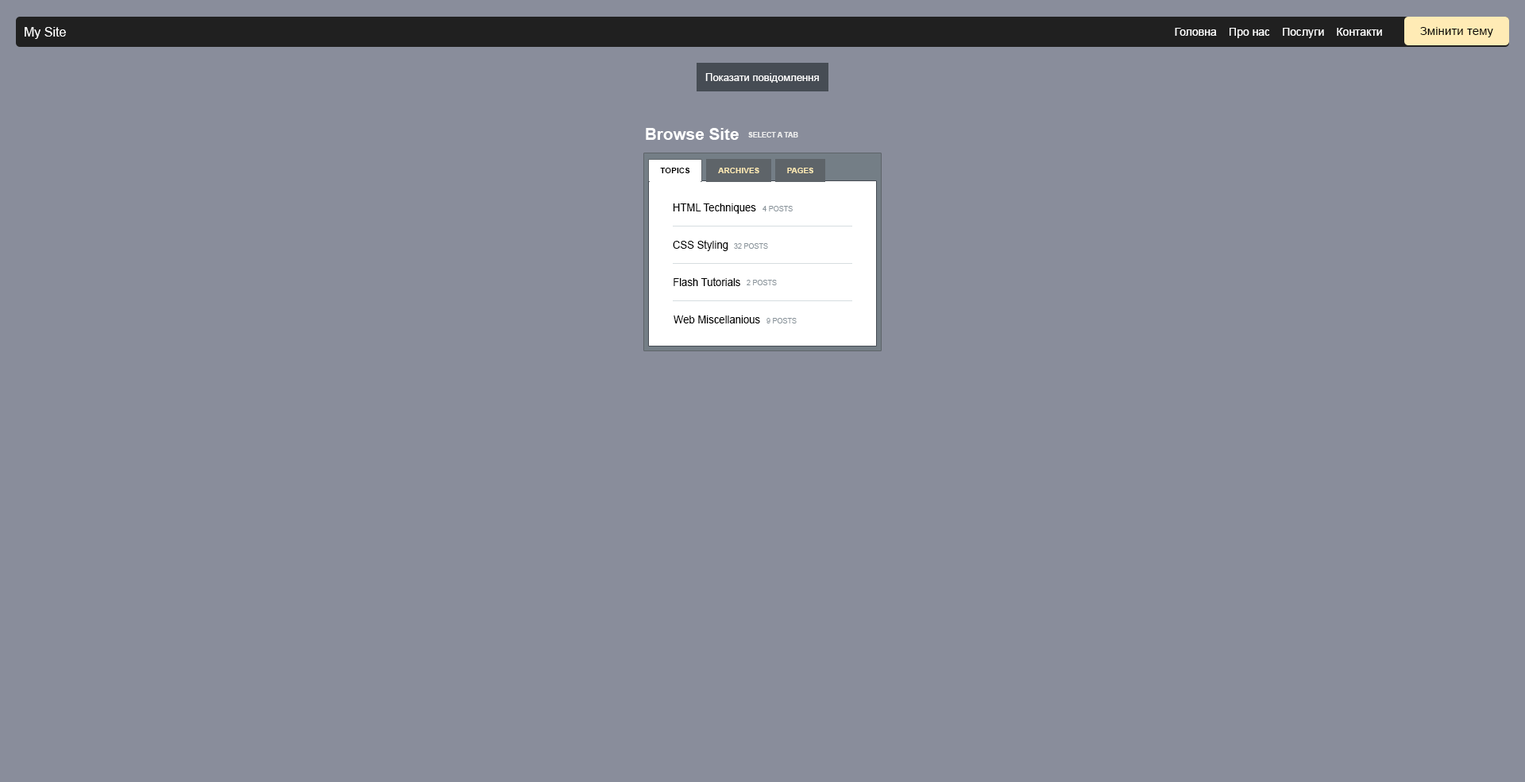
<style>
.page{position:relative;width:1525px;height:782px;background:#898d9b}
.page>*{position:absolute;margin:0}
.t1{font:12.7px "ArialMT";color:#fefefe}
.t2{font:11.1px "ArialMT";color:#fefefe}
.t3{font:11.1px "ArialMT";color:#000000;scale:1.08 1}
.t4{font:10.3px "ArialMT";color:#ffffff}
.t5{font:16.7px "Arial-BoldMT";color:#fefefe}
.t6{font:7.7px "Arial-BoldMT";color:#eeeeee;scale:0.91 1}
.t7{font:7.2px "Arial-BoldMT";color:#000000;scale:1.13 1}
.t8{font:7.2px "Arial-BoldMT";color:#ffebb5;scale:1.12 1}
.t9{font:7.2px "Arial-BoldMT";color:#ffebb5;scale:1.09 1}
.t10{font:11.1px "ArialMT";color:#000000;scale:0.94 1}
.t11{font:7.2px "ArialMT";color:#8b959c}
</style>
<div class="page">
<p class="t1" style="left:25px;top:27px;width:41px;height:12px">My Site</p>
<p class="t2" style="left:1175px;top:28px;width:42px;height:8px">Головна</p>
<p class="t2" style="left:1230px;top:28px;width:40px;height:10px">Про нас</p>
<p class="t2" style="left:1283px;top:28px;width:41px;height:10px">Послуги</p>
<p class="t2" style="left:1337px;top:28px;width:45px;height:8px">Контакти</p>
<p class="t3" style="left:1420px;top:27px;width:74px;height:10px">Змінити тему</p>
<p class="t4" style="left:705px;top:73px;width:114px;height:10px">Показати повідомлення</p>
<p class="t5" style="left:646px;top:128px;width:93px;height:12px">Browse Site</p>
<p class="t6" style="left:748px;top:132px;width:50px;height:5px">SELECT A TAB</p>
<p class="t7" style="left:660px;top:168px;width:30px;height:5px">TOPICS</p>
<p class="t8" style="left:718px;top:168px;width:41px;height:5px">ARCHIVES</p>
<p class="t9" style="left:787px;top:168px;width:27px;height:5px">PAGES</p>
<p class="t10" style="left:673px;top:203px;width:83px;height:11px">HTML Techniques</p>
<p class="t11" style="left:763px;top:206px;width:30px;height:5px">4 POSTS</p>
<p class="t10" style="left:673px;top:240px;width:56px;height:11px">CSS Styling</p>
<p class="t11" style="left:734px;top:243px;width:34px;height:6px">32 POSTS</p>
<p class="t10" style="left:674px;top:277px;width:66px;height:9px">Flash Tutorials</p>
<p class="t11" style="left:747px;top:280px;width:30px;height:5px">2 POSTS</p>
<p class="t10" style="left:674px;top:315px;width:86px;height:8px">Web Miscellanious</p>
<p class="t11" style="left:767px;top:318px;width:30px;height:5px">9 POSTS</p>
</div>
